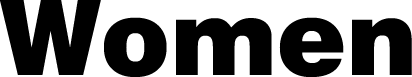
<style>
.page{position:relative;width:412px;height:77px;background:#000000}
.page>*{position:absolute;margin:0}
.t1{font:104.2px "Swiss721BT-Black";color:#000000}
</style>
<div class="page">
<p class="t1" style="left:0px;top:0px;width:412px;height:77px">Women</p>
</div>
